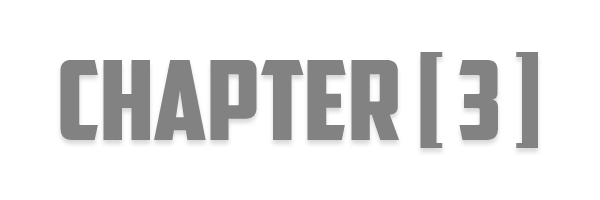
<style>
.page{position:relative;width:600px;height:200px;background:#ffffff}
.page>*{position:absolute;margin:0}
.t1{font:110.3px "AmericanCaptain";color:#828282;scale:1.12 1}
</style>
<div class="page">
<p class="t1" style="left:60px;top:52px;width:478px;height:96px">chapter [ 3 ]</p>
</div>
